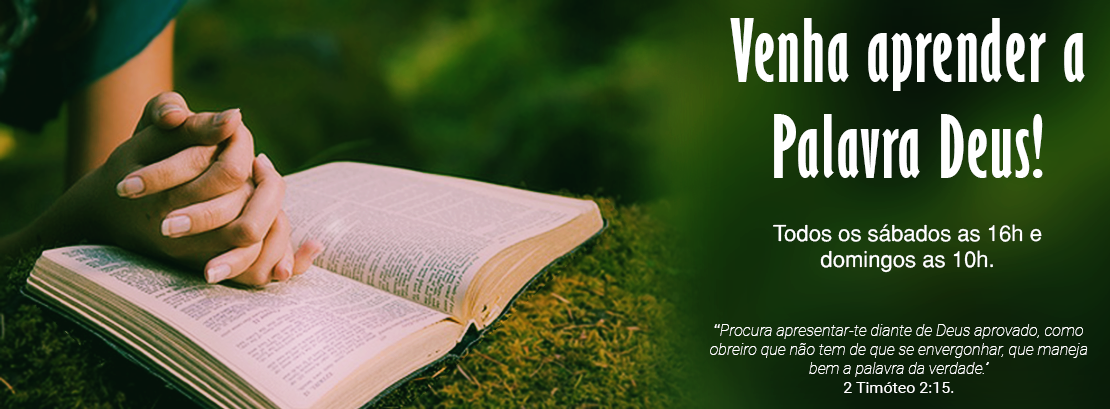
<style>
.page{position:relative;width:1110px;height:409px}
.page>*{position:absolute;margin:0}
.t1{font:22px "Helvetica-Normal";color:#ffffff}
.t2{font:80px "GillSansMT-ExtraCondensedBold";letter-spacing:0.03em;color:#ffffff}
.t3{font:16px "Roboto-ThinItalic";color:#ffffff}
.t4{font:16px "Roboto-Regular";color:#ffffff}
</style>
<div class="page">
<p class="t1" style="left:730px;top:18px;width:355px;height:255px;text-align:center"><span class="t2">Venha aprender a Palavra Deus!<br><br></span>Todos os sábados as 16h e domingos as 10h.</p>
<p class="t3" style="left:710px;top:324px;width:378px;height:69px;text-align:center"><span class="t4">“</span>Procura apresentar-te diante de Deus aprovado, como obreiro que não tem de que se envergonhar, que maneja bem a palavra da verdade.” <br><span class="t4">2 Timóteo 2:15.</span></p>
</div>
